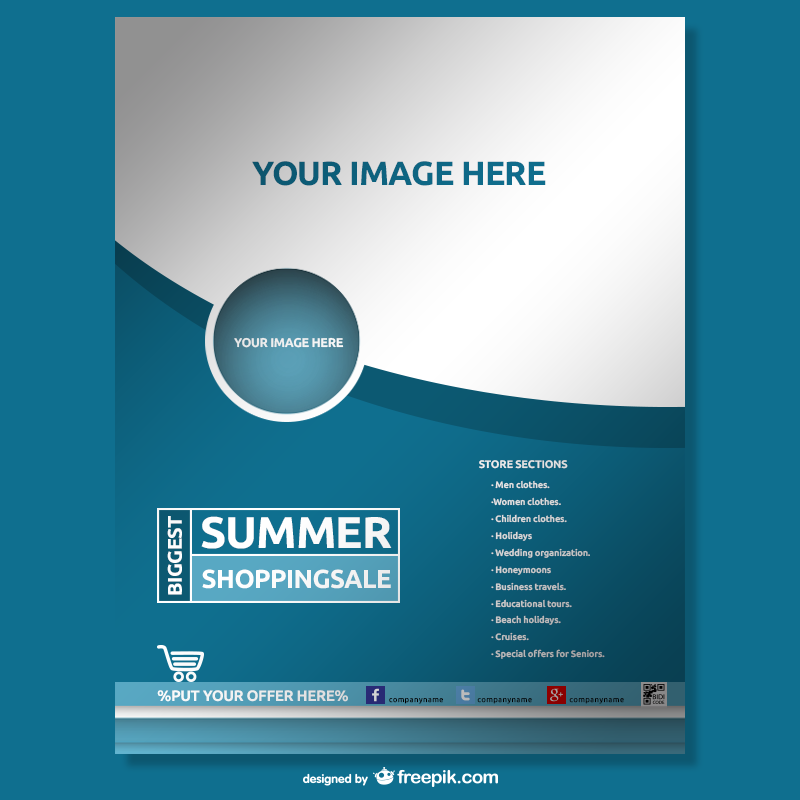
<style>
.page{position:relative;width:800px;height:800px;background:#0f6f8f}
.page>*{position:absolute;margin:0}
.t1{font:33.4px "Ubuntu-Bold";letter-spacing:-0.025em;color:#0f6f8f}
.t2{font:12.6px "Ubuntu-Bold";letter-spacing:-0.025em;color:#ffffff}
.t3{font:11px "Ubuntu-Bold";letter-spacing:-0.025em;color:#e5e5e5}
.t4{font:9.4px/16.9px "Ubuntu-Bold";letter-spacing:-0.025em;color:#c9c8c9}
.t5{font:19.8px "Ubuntu-Bold";letter-spacing:-0.025em;color:#ffffff}
.t6{font:44.4px "Ubuntu-Bold";letter-spacing:-0.025em;color:#ffffff}
.t7{font:25.9px "Ubuntu-Bold";letter-spacing:-0.025em;color:#ffffff}
.t8{font:15.3px "Ubuntu-Bold";letter-spacing:-0.025em;color:#ffffff}
.t9{font:7.2px "Ubuntu-Light";letter-spacing:0.1em;color:#000000}
</style>
<div class="page">
<p class="t1" style="left:252px;top:161px;width:294px;height:25px">YOUR IMAGE HERE</p>
<p class="t2" style="left:234px;top:337px;width:110px;height:11px">YOUR IMAGE HERE</p>
<p class="t3" style="left:479px;top:460px;width:89px;height:9px">STORE SECTIONS</p>
<p class="t4" style="left:491px;top:480px;width:114px;height:179px">· Men clothes.<br>·Women clothes.<br>· Children clothes.<br>· Holidays<br>· Wedding organization.<br>· Honeymoons<br>· Business travels.<br>· Educational tours.<br>· Beach holidays.<br>· Cruises.<br>· Special offers for Seniors.</p>
<p class="t5" style="left:167px;top:516px;width:15px;height:79px;rotate:-90deg">BIGGEST</p>
<p class="t6" style="left:201px;top:516px;width:191px;height:33px">SUMMER</p>
<p class="t7" style="left:202px;top:569px;width:189px;height:20px">SHOPPINGSALE</p>
<p class="t8" style="left:157px;top:690px;width:191px;height:12px">%PUT YOUR OFFER HERE%</p>
<p class="t9" style="left:389px;top:698px;width:54px;height:6px">companyname</p>
<p class="t9" style="left:477px;top:698px;width:55px;height:6px">companyname</p>
<p class="t9" style="left:569px;top:698px;width:55px;height:6px">companyname</p>
</div>
